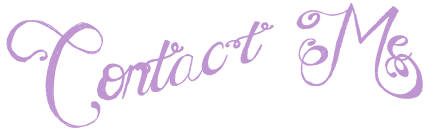
<style>
.page{position:relative;width:432px;height:134px;background:#ffffff}
.page>*{position:absolute;margin:0}
.t1{font:96px "MTFUnderYourSkin";color:#be94d1}
</style>
<div class="page">
<p class="t1" style="left:6px;top:3px;width:417px;height:125px">Contact Me</p>
</div>
